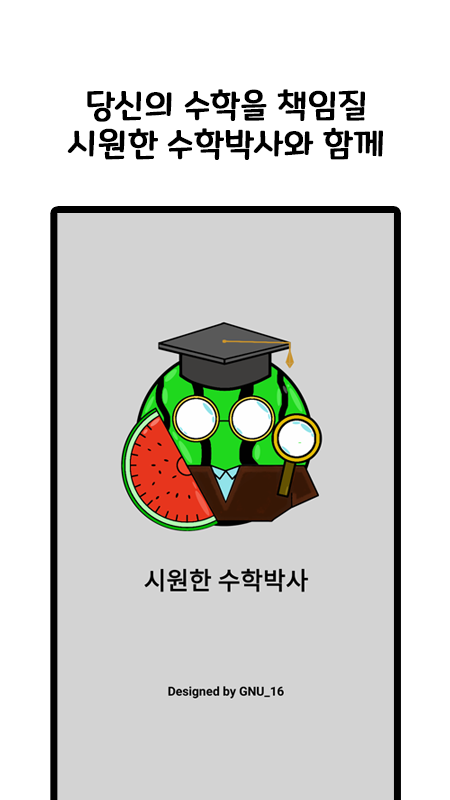
<style>
.page{position:relative;width:450px;height:800px;background:#d3d3d3}
.page>*{position:absolute;margin:0}
.t1{font:33px/39.6px "MaplestoryLight";color:#000000;font-weight:bold}
</style>
<div class="page">
<p class="t1" style="left:67px;top:89px;width:316px;height:71px;text-align:center">당신의 수학을 책임질<br>시원한 수학박사와 함께</p>
</div>
